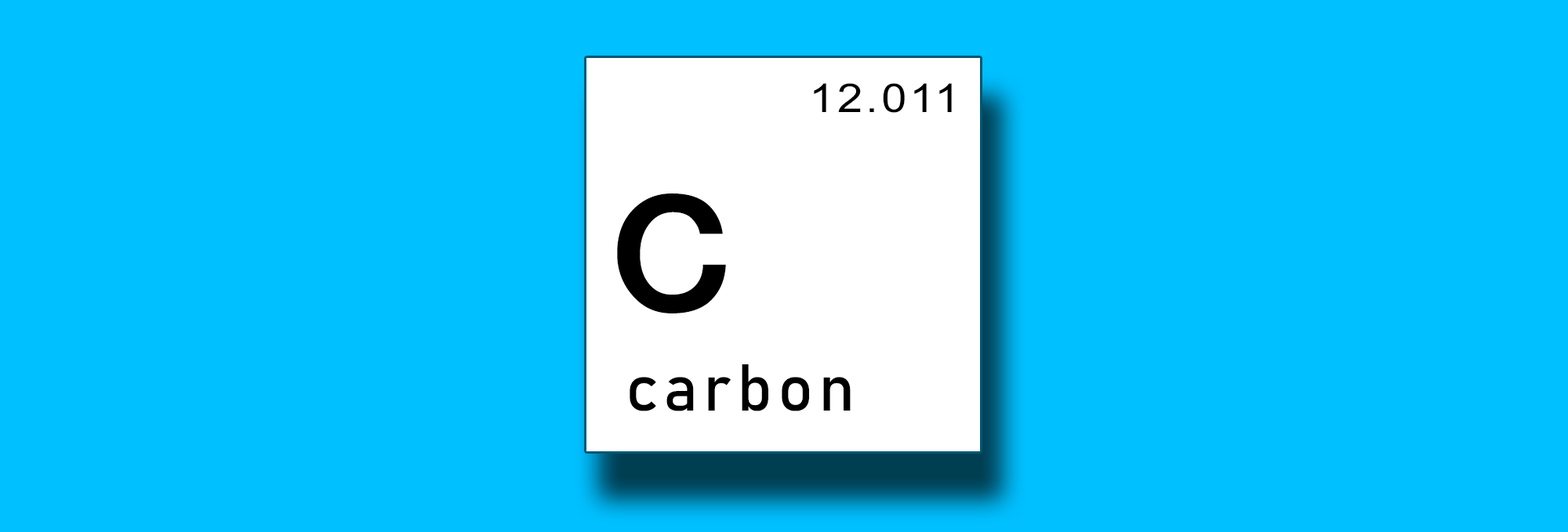
<style>
.page{position:relative;width:1568px;height:532px;background:#00c0ff}
.page>*{position:absolute;margin:0}
.t1{font:39.8px "ArialMT";letter-spacing:0.06em;color:#000000;scale:1.15 1}
.t2{font:264.6px "MS-PGothic";letter-spacing:0.08em;color:#000000}
.t3{font:65.3px "Bahnschrift";letter-spacing:0.08em;color:#000000}
</style>
<div class="page">
<p class="t1" style="left:814px;top:83px;width:138px;height:30px">12.011</p>
<p class="t2" style="left:617px;top:193px;width:109px;height:121px">c</p>
<p class="t3" style="left:630px;top:365px;width:221px;height:47px">carbon</p>
</div>
